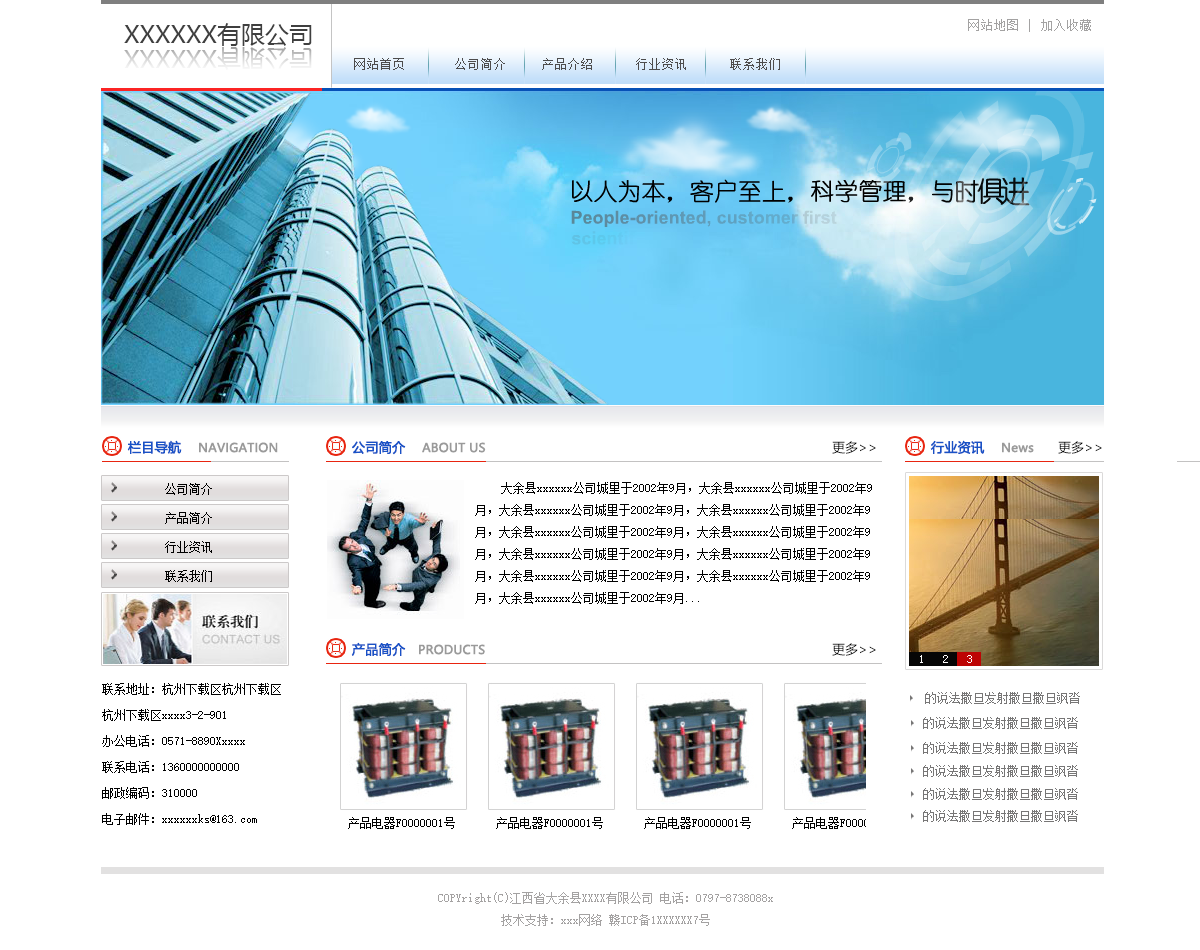
<style>
.page{position:relative;width:1200px;height:950px;background:#ffffff}
.page>*{position:absolute;margin:0}
.t1{font:24px "MicrosoftYaHei";color:#3f3f3f}
.t2{font:13px "SimSun";color:#a3a2a2}
.t3{font:24px "MicrosoftYaHei"}
.t4{font:13px "SimSun";color:#4d4c4c}
.t5{font:12px "MicrosoftYaHei";color:#9a9a9a;font-weight:bold}
.t6{font:13px "MicrosoftYaHei";color:#1952c6;font-weight:bold}
.t7{font:13px "MicrosoftYaHei";color:#000000}
.t8{font:12px "SimSun";color:#000000}
.t9{font:12px/22px "SimSun";color:#000000}
.t10{font:13px/22px "MicrosoftYaHei";color:#000000}
.t11{font:12px "SimSun";color:#fdfbfb}
.t12{font:12px/26px "SimSun";color:#000000}
.t13{font:12px "SimSun";color:#777676}
.t14{font:12px/22px "SimSun";color:#a4a2a2}
</style>
<div class="page">
<p class="t1" style="left:124px;top:23px;width:188px;height:23px">XXXXXX有限公司</p>
<p class="t2" style="left:968px;top:19px;width:123px;height:13px">网站地图 | 加入收藏</p>
<p class="t3" style="left:124px;top:47px;width:188px;height:23px">XXXXXX有限公司</p>
<p class="t4" style="left:354px;top:58px;width:426px;height:12px">网站首页       公司简介     产品介绍      行业资讯      联系我们</p>
<p class="t5" style="left:127px;top:440px;width:151px;height:14px"><span class="t6">栏目导航    </span>NAVIGATION</p>
<p class="t5" style="left:352px;top:441px;width:134px;height:14px"><span class="t6">公司简介    </span>ABOUT US</p>
<p class="t7" style="left:832px;top:441px;width:44px;height:13px">更多&gt;&gt;</p>
<p class="t6" style="left:930px;top:440px;width:104px;height:14px">行业资讯    <span class="t5">News</span></p>
<p class="t7" style="left:1058px;top:441px;width:44px;height:13px">更多&gt;&gt;</p>
<p class="t8" style="left:165px;top:483px;width:47px;height:12px">公司简介</p>
<p class="t9" style="left:475px;top:482px;width:397px;height:122px"><span class="t10">　　</span>大余县xxxxxx公司城里于2002年9月，大余县xxxxxx公司城里于2002年9月，大余县xxxxxx公司城里于2002年9月，大余县xxxxxx公司城里于2002年9月，大余县xxxxxx公司城里于2002年9月，大余县xxxxxx公司城里于2002年9月，大余县xxxxxx公司城里于2002年9月，大余县xxxxxx公司城里于2002年9月，大余县xxxxxx公司城里于2002年9月，大余县xxxxxx公司城里于2002年9月，大余县xxxxxx公司城里于2002年9月...</p>
<p class="t8" style="left:165px;top:512px;width:47px;height:12px">产品简介</p>
<p class="t8" style="left:165px;top:541px;width:47px;height:12px">行业资讯</p>
<p class="t8" style="left:165px;top:570px;width:47px;height:12px">联系我们</p>
<p class="t5" style="left:351px;top:642px;width:134px;height:15px"><span class="t6">产品简介   </span>PRODUCTS</p>
<p class="t7" style="left:832px;top:643px;width:44px;height:13px">更多&gt;&gt;</p>
<p class="t11" style="left:920px;top:655px;width:3px;height:8px">1</p>
<p class="t11" style="left:943px;top:655px;width:5px;height:8px">2</p>
<p class="t11" style="left:967px;top:655px;width:5px;height:8px">3</p>
<p class="t12" style="left:102px;top:683px;width:179px;height:142px">联系地址：杭州下载区杭州下载区<br>杭州下载区xxxx3-2-901<br>办公电话：0571-8890Xxxxx<br>联系电话：1360000000000<br>邮政编码：310000<br>电子邮件：xxxxxxks@163.com</p>
<p class="t13" style="left:925px;top:692px;width:155px;height:12px">的说法撒旦发射撒旦撒旦飒沓</p>
<p class="t13" style="left:923px;top:717px;width:155px;height:12px">的说法撒旦发射撒旦撒旦飒沓</p>
<p class="t13" style="left:923px;top:742px;width:155px;height:12px">的说法撒旦发射撒旦撒旦飒沓</p>
<p class="t13" style="left:923px;top:765px;width:155px;height:12px">的说法撒旦发射撒旦撒旦飒沓</p>
<p class="t13" style="left:923px;top:788px;width:155px;height:12px">的说法撒旦发射撒旦撒旦飒沓</p>
<p class="t8" style="left:348px;top:817px;width:107px;height:12px">产品电器F0000001号</p>
<p class="t8" style="left:496px;top:817px;width:107px;height:12px">产品电器F0000001号</p>
<p class="t8" style="left:644px;top:817px;width:107px;height:12px">产品电器F0000001号</p>
<p class="t8" style="left:792px;top:817px;width:107px;height:12px">产品电器F0000001号</p>
<p class="t13" style="left:923px;top:810px;width:155px;height:12px">的说法撒旦发射撒旦撒旦飒沓</p>
<p class="t14" style="left:438px;top:892px;width:335px;height:34px;text-align:center">COPYright(C)江西省大余县XXXX有限公司 电话：0797-8738088x<br>技术支持：xxx网络 赣ICP备1XXXXXX7号</p>
</div>
